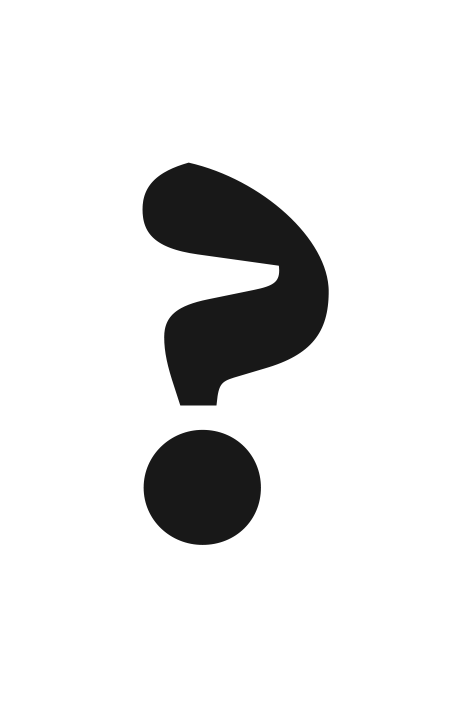
<style>
.page{position:relative;width:464px;height:716px;background:#ffffff}
.page>*{position:absolute;margin:0}
.t1{font:555.6px "SourceSerifRoman-Black";color:#181818}
</style>
<div class="page">
<p class="t1" style="left:142px;top:162px;width:187px;height:383px">?</p>
</div>
